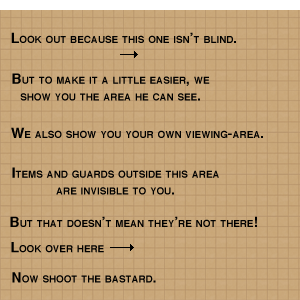
<style>
.page{position:relative;width:300px;height:300px}
.page>*{position:absolute;margin:0}
.t1{font:14px "Helvetica-Bold";color:#000000;font-variant:small-caps}
</style>
<div class="page">
<p class="t1" style="left:11px;top:32px;width:225px;height:11px">Look out because this one isn’t blind.</p>
<p class="t1" style="left:12px;top:73px;width:198px;height:28px;text-align:center">But to make it a little easier, we<br>show you the area he can see.</p>
<p class="t1" style="left:11px;top:127px;width:252px;height:11px">We also show you your own viewing-area.</p>
<p class="t1" style="left:12px;top:167px;width:207px;height:28px;text-align:center">Items and guards outside this area<br>are invisible to you.</p>
<p class="t1" style="left:10px;top:216px;width:247px;height:11px">But that doesn’t mean they’re not there!</p>
<p class="t1" style="left:11px;top:242px;width:93px;height:11px">Look over here</p>
<p class="t1" style="left:12px;top:272px;width:144px;height:11px">Now shoot the bastard.</p>
</div>
